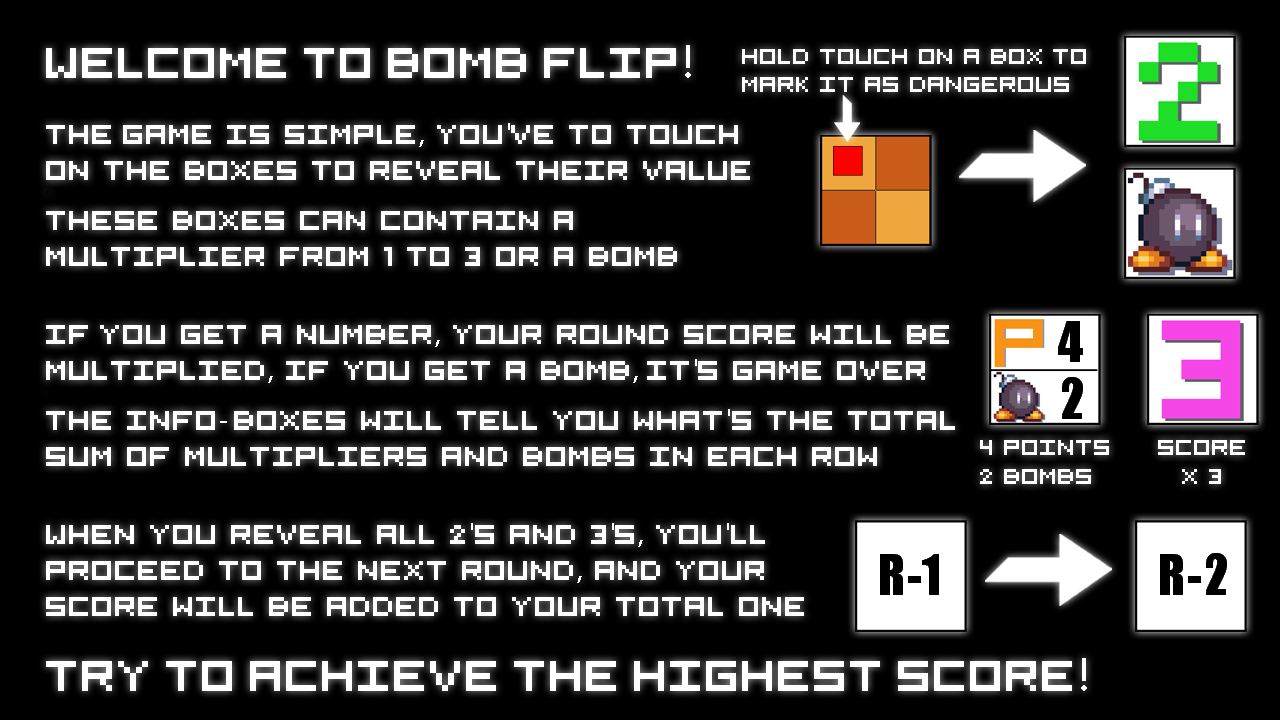
<style>
.page{position:relative;width:1280px;height:720px;background:#000000}
.page>*{position:absolute;margin:0}
.t1{font:48px "5x5-Pixel";color:#ffffff}
.t2{font:48px "MyriadPro-Regular";color:#ffffff}
.t3{font:24px "5x5-Pixel";color:#ffffff}
.t4{font:30px "5x5-Pixel";color:#ffffff}
.t5{font:30px "MyriadPro-Regular";color:#ffffff}
.t6{font:6px "MyriadPro-Regular";color:#000000}
</style>
<div class="page">
<p class="t1" style="left:46px;top:45px;width:645px;height:33px">Welcome  to  Bomb  flip<span class="t2">!</span></p>
<p class="t3" style="left:742px;top:49px;width:344px;height:43px">hold   touch   on   a   box  To   mark   it   as   dangerous</p>
<p class="t4" style="left:46px;top:123px;width:704px;height:143px">The  game   is   simple<span class="t5">,</span>   you<span class="t5">'</span>ve   to   touch<br>on   the   boxes   to   reveal   their   value<br><span class="t6">.<br>.t<br></span>These   boxes   can   contain   a   multiplier   from   1   to   3   or   a   bomb</p>
<p class="t4" style="left:46px;top:325px;width:909px;height:141px">If  you   get   a   number<span class="t5">,</span>   your   round   score   will   be   multiplied<span class="t5">,</span>   if   you   get   a   bomb<span class="t5">,</span>  it<span class="t5">'</span>s   game   over<br><span class="t6">.<br>.<br></span>The   info<span class="t5">- </span>boxes   will   tell   you   what<span class="t5">'</span>s   the   total sum   of   multipliers   and   bombs   in   each   row column</p>
<p class="t3" style="left:980px;top:440px;width:129px;height:44px">4   points<br>2   bombs</p>
<p class="t3" style="left:1158px;top:440px;width:87px;height:44px">Score  <br>        x   3</p>
<p class="t4" style="left:46px;top:523px;width:758px;height:93px">When   you   reveal   all   2<span class="t5">'</span>s   and   3<span class="t5">'</span>s<span class="t5">,</span>   you<span class="t5">'</span>ll proceed   to   the   next   round<span class="t5">,</span>   and   your   score   will   be   added   to   your   total   one</p>
<p class="t1" style="left:46px;top:658px;width:1041px;height:33px">Try  to  achieve  the  highest  score<span class="t2">!</span></p>
</div>
